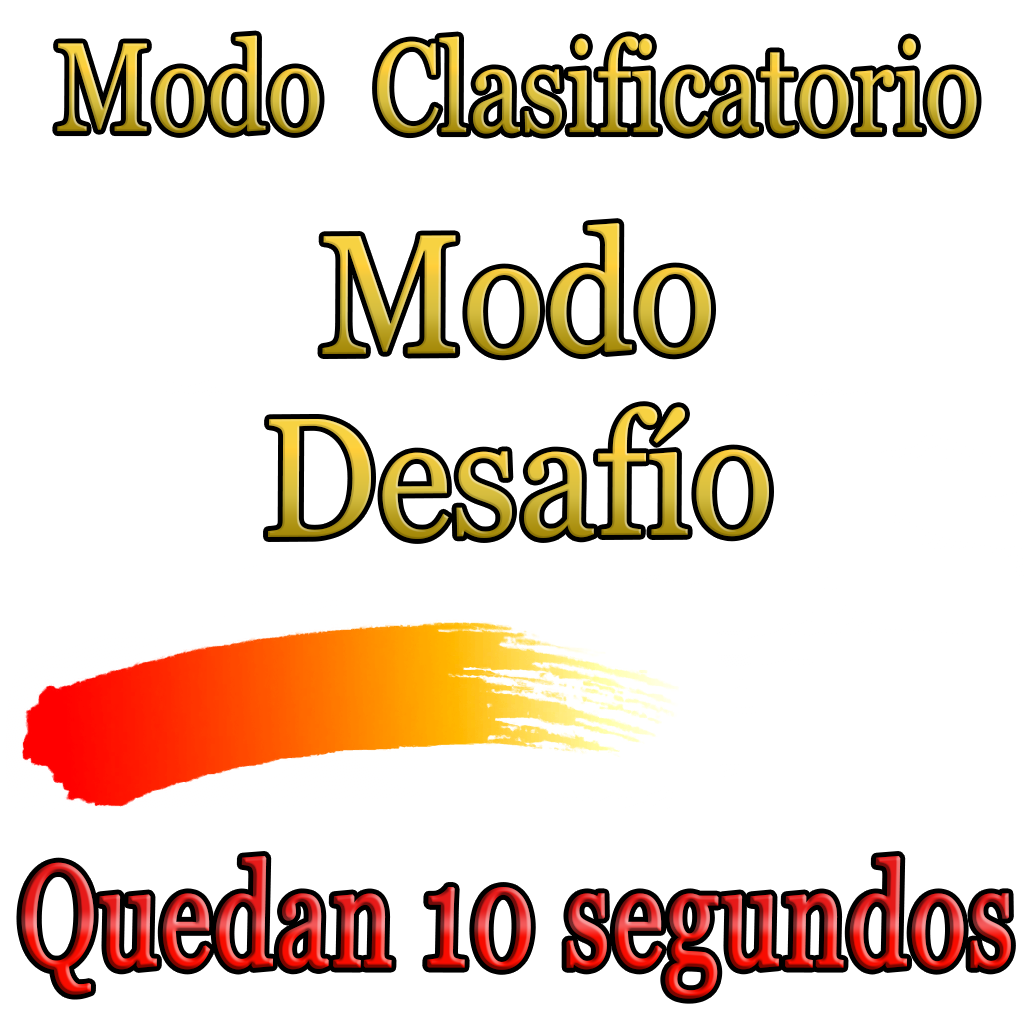
<style>
.page{position:relative;width:1024px;height:1024px;background:#ffffff}
.page>*{position:absolute;margin:0}
.t1{font:126.2px "Georgia";scale:0.82 1}
.t2{font:169.9px "Georgia";scale:0.91 1}
.t3{font:143.5px "Georgia";font-weight:bold;scale:0.72 1}
</style>
<div class="page">
<p class="t1" style="left:57px;top:35px;width:920px;height:99px">Modo  Clasificatorio</p>
<p class="t2" style="left:322px;top:223px;width:389px;height:133px">Modo</p>
<p class="t2" style="left:268px;top:406px;width:501px;height:133px">Desafío</p>
<p class="t3" style="left:21px;top:856px;width:990px;height:143px">Quedan 10 segundos</p>
</div>
